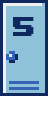
<style>
.page{position:relative;width:48px;height:113px;background:#8dc2d8}
.page>*{position:absolute;margin:0}
.t1{font:37.3px "UpheavalTT-BRK-";color:#102860}
</style>
<div class="page">
<p class="t1" style="left:13px;top:17px;width:21px;height:19px">5</p>
</div>
